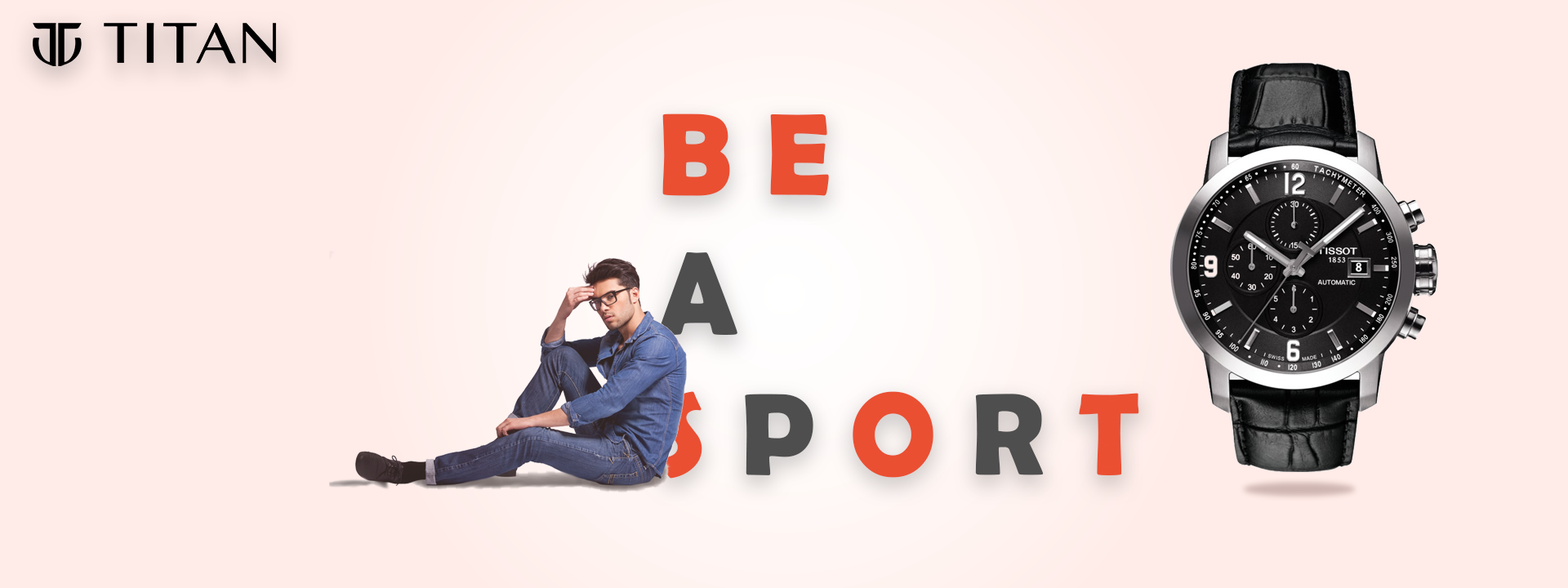
<style>
.page{position:relative;width:1568px;height:588px;background:#ffebe7}
.page>*{position:absolute;margin:0}
.t1{font:116.6px "BerlinSansFBDemi-Bold";letter-spacing:0.28em;color:#ea4f32;font-weight:bold}
.t2{font:116.6px "BerlinSansFBDemi-Bold";letter-spacing:0.28em;color:#4e4e4e;font-weight:bold}
</style>
<div class="page">
<p class="t1" style="left:658px;top:114px;width:481px;height:365px">BE<br><span class="t2">A<br></span>S<span class="t2">P</span>O<span class="t2">R</span>T</p>
</div>
